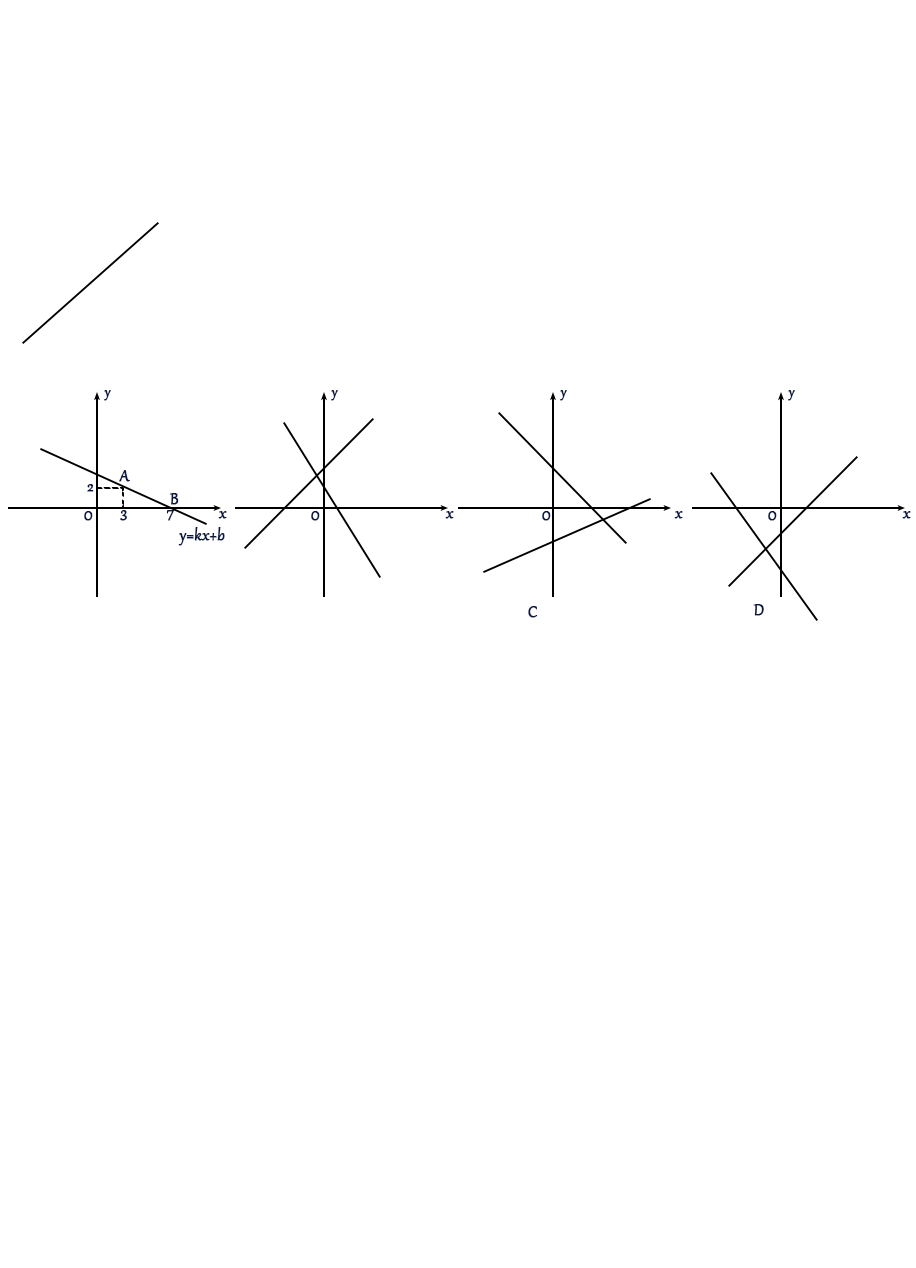
<style>
.page{position:relative;width:916px;height:1268px;background:#ffffff}
.page>*{position:absolute;margin:0}
.t1{font:16px "Gabriola";color:#081842;font-weight:bold}
.t2{font:18.7px "Gabriola";color:#081842;font-weight:bold}
</style>
<div class="page">
<p class="t1" style="left:104px;top:390px;width:7px;height:11px">y</p>
<p class="t1" style="left:331px;top:390px;width:7px;height:11px">y</p>
<p class="t1" style="left:560px;top:390px;width:7px;height:11px">y</p>
<p class="t1" style="left:788px;top:390px;width:7px;height:11px">y</p>
<p class="t2" style="left:119px;top:470px;width:11px;height:12px">A</p>
<p class="t2" style="left:87px;top:484px;width:7px;height:8px">2</p>
<p class="t2" style="left:169px;top:493px;width:10px;height:12px">B</p>
<p class="t2" style="left:120px;top:510px;width:7px;height:11px">3</p>
<p class="t2" style="left:166px;top:510px;width:9px;height:11px">7</p>
<p class="t1" style="left:84px;top:511px;width:9px;height:10px">O</p>
<p class="t2" style="left:218px;top:511px;width:9px;height:8px">x</p>
<p class="t1" style="left:311px;top:511px;width:9px;height:10px">O</p>
<p class="t2" style="left:445px;top:511px;width:9px;height:8px">x</p>
<p class="t1" style="left:542px;top:511px;width:9px;height:10px">O</p>
<p class="t2" style="left:674px;top:511px;width:9px;height:8px">x</p>
<p class="t1" style="left:768px;top:511px;width:9px;height:10px">O</p>
<p class="t2" style="left:902px;top:511px;width:9px;height:8px">x</p>
<p class="t2" style="left:178px;top:527px;width:47px;height:19px">y=kx+b</p>
<p class="t2" style="left:528px;top:606px;width:10px;height:12px">C</p>
<p class="t2" style="left:753px;top:604px;width:11px;height:12px">D</p>
</div>
